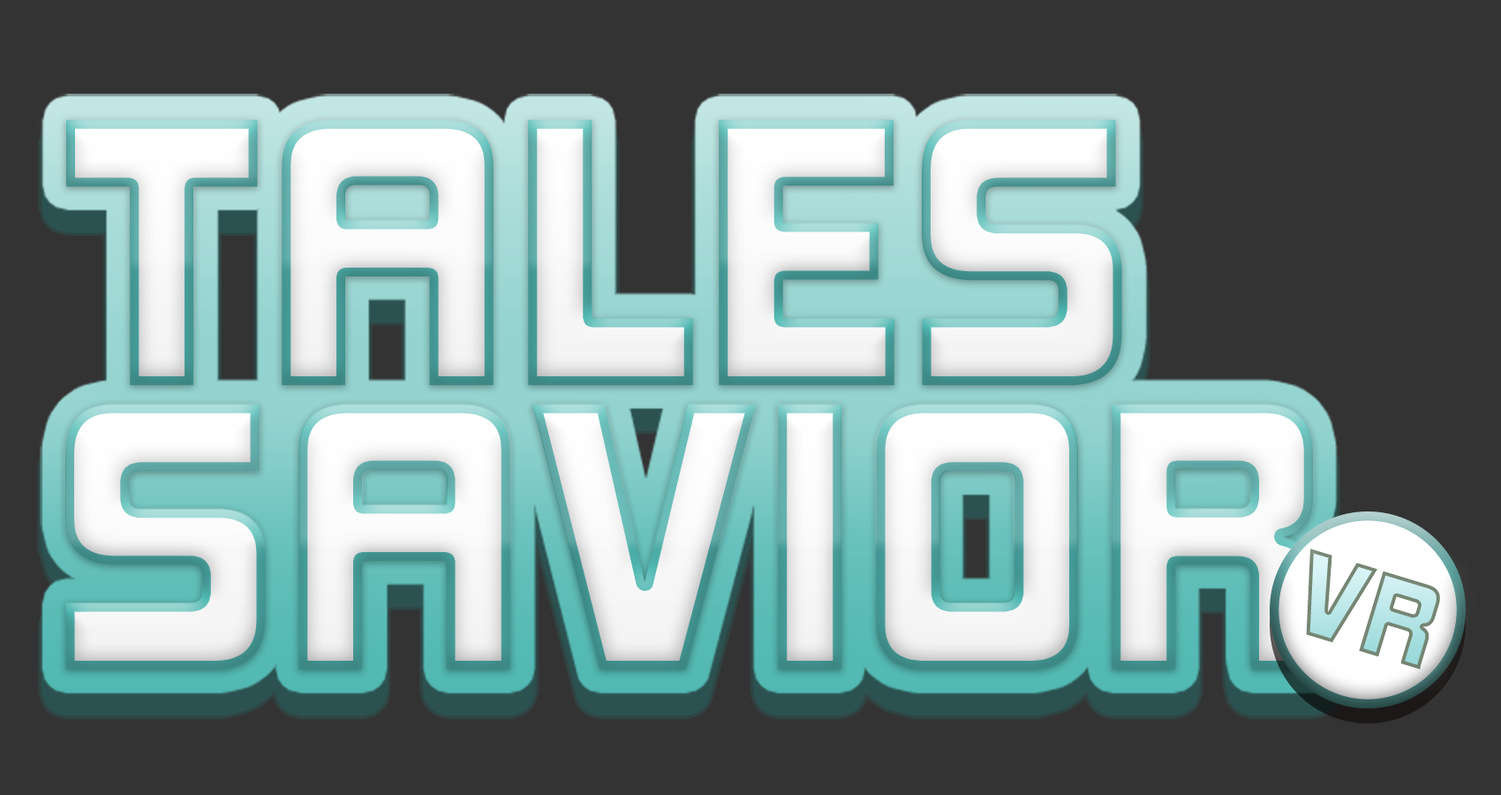
<style>
.page{position:relative;width:1501px;height:795px;background:#333333}
.page>*{position:absolute;margin:0}
.t1{font:348.8px "KimberleyBl-Regular";letter-spacing:0.01em;scale:1.05 1}
.t2{font:109px "KimberleyBl-Regular";letter-spacing:0.01em;scale:1.05 1}
</style>
<div class="page">
<p class="t1" style="left:66px;top:119px;width:1056px;height:266px">TALES</p>
<p class="t1" style="left:65px;top:403px;width:1250px;height:266px">SAVIOR</p>
<p class="t2" style="left:1306px;top:548px;width:134px;height:121px;rotate:17deg">VR</p>
</div>
